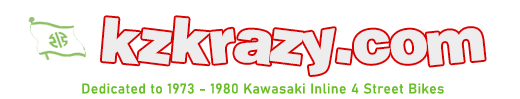
<style>
.page{position:relative;width:520px;height:99px;background:#ffffff}
.page>*{position:absolute;margin:0}
.t1{font:60px "Soopafresh";letter-spacing:0.025em;color:#ededed}
.t2{font:14px "Bahnschrift";letter-spacing:0.025em;color:#69bd27}
</style>
<div class="page">
<p class="t1" style="left:102px;top:17px;width:383px;height:58px">kzkrazy.com</p>
<p class="t2" style="left:82px;top:83px;width:362px;height:11px">Dedicated to 1973 - 1980 Kawasaki Inline 4 Street Bikes</p>
</div>
